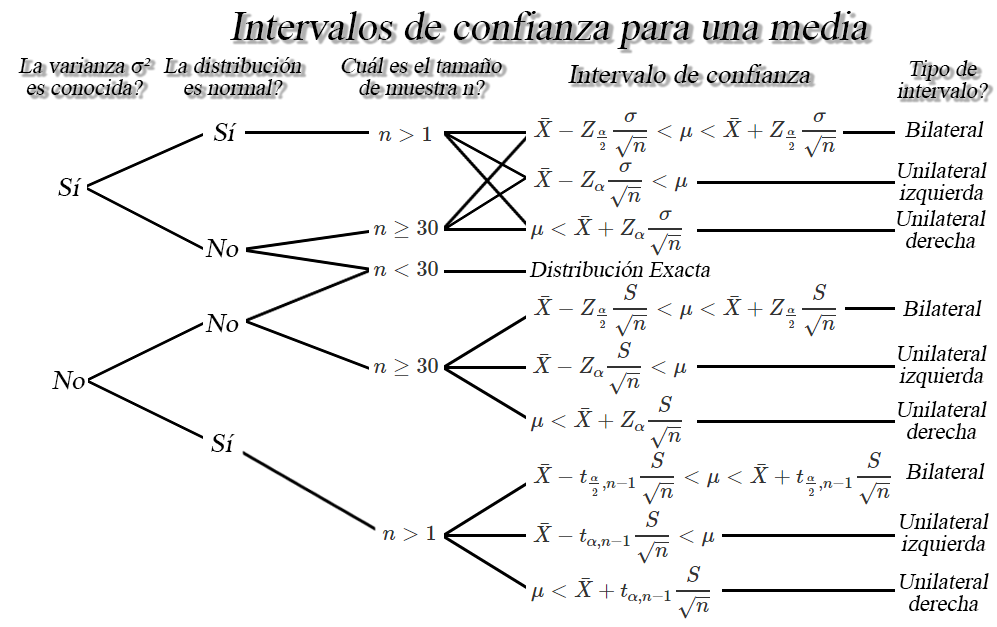
<style>
.page{position:relative;width:997px;height:627px;background:#ffffff}
.page>*{position:absolute;margin:0}
.t1{font:30.5px "TimesNewRomanPSMT";color:#000000;font-style:italic}
.t2{font:17px/21.7px "TimesNewRomanPSMT";color:#000000;font-style:italic}
.t3{font:20.4px "TimesNewRomanPSMT";color:#000000;font-style:italic}
.t4{font:26.7px "TimesNewRomanPSMT";color:#000000;font-style:italic}
.t5{font:17px "TimesNewRomanPSMT";color:#000000;font-style:italic}
</style>
<div class="page">
<p class="t1" style="left:230px;top:11px;width:638px;height:38px">Intervalos de confianza para una media</p>
<p class="t2" style="left:18px;top:57px;width:133px;height:38px;text-align:center">La varianza σ²<br>es conocida?</p>
<p class="t2" style="left:163px;top:57px;width:138px;height:38px;text-align:center">La distribución<br>es normal?</p>
<p class="t2" style="left:341px;top:57px;width:161px;height:38px;text-align:center">Cuál es el tamaño<br>de muestra n?</p>
<p class="t3" style="left:568px;top:64px;width:243px;height:19px">Intervalo de confianza</p>
<p class="t2" style="left:897px;top:60px;width:91px;height:38px;text-align:center">Tipo de<br>intervalo?</p>
<p class="t4" style="left:213px;top:123px;width:24px;height:18px">Sí</p>
<p class="t5" style="left:905px;top:121px;width:79px;height:16px">Bilateral</p>
<p class="t2" style="left:898px;top:162px;width:89px;height:43px;text-align:center">Unilateral<br>izquierda</p>
<p class="t4" style="left:58px;top:178px;width:24px;height:18px">Sí</p>
<p class="t2" style="left:897px;top:210px;width:89px;height:38px;text-align:center">Unilateral<br>derecha</p>
<p class="t4" style="left:205px;top:239px;width:34px;height:19px">No</p>
<p class="t5" style="left:529px;top:261px;width:182px;height:16px">Distribución Exacta</p>
<p class="t5" style="left:903px;top:300px;width:79px;height:16px">Bilateral</p>
<p class="t4" style="left:205px;top:314px;width:34px;height:19px">No</p>
<p class="t2" style="left:898px;top:345px;width:89px;height:43px;text-align:center">Unilateral<br>izquierda</p>
<p class="t4" style="left:52px;top:371px;width:33px;height:19px">No</p>
<p class="t2" style="left:898px;top:401px;width:89px;height:38px;text-align:center">Unilateral<br>derecha</p>
<p class="t4" style="left:211px;top:434px;width:24px;height:18px">Sí</p>
<p class="t5" style="left:906px;top:463px;width:79px;height:16px">Bilateral</p>
<p class="t2" style="left:900px;top:513px;width:89px;height:43px;text-align:center">Unilateral<br>izquierda</p>
<p class="t2" style="left:900px;top:573px;width:89px;height:38px;text-align:center">Unilateral<br>derecha</p>
</div>
